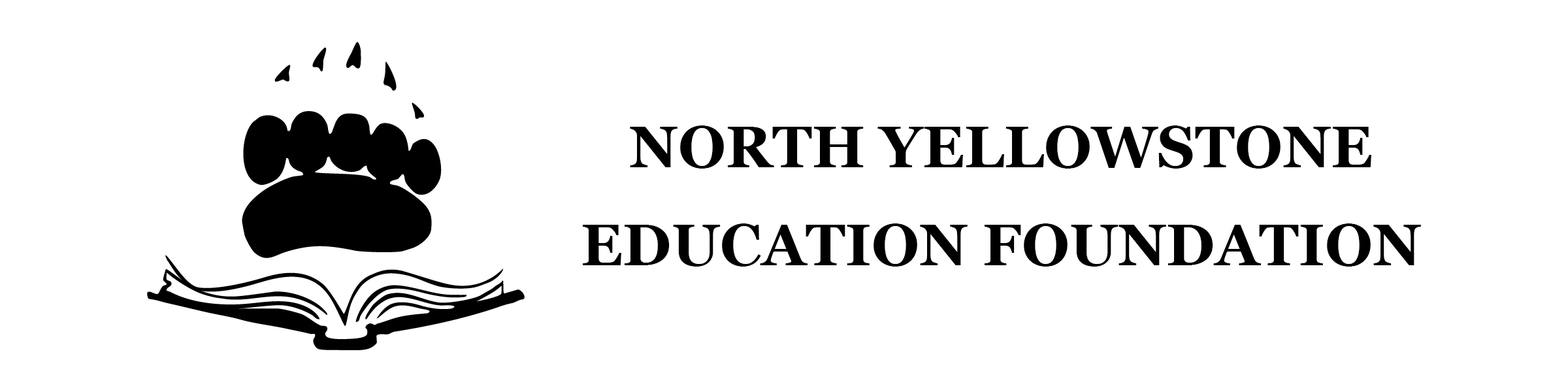
<style>
.page{position:relative;width:1568px;height:392px;background:#ffffff}
.page>*{position:absolute;margin:0}
.t1{font:58.1px/98px "Georgia-Bold";color:#000000}
</style>
<div class="page">
<p class="t1" style="left:583px;top:125px;width:838px;height:142px;text-align:center">NORTH YELLOWSTONE<br>EDUCATION FOUNDATION</p>
</div>
